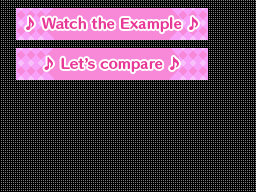
<style>
.page{position:relative;width:256px;height:192px;background:#000000}
.page>*{position:absolute;margin:0}
.t1{font:13px "HummingStd-E";letter-spacing:0.02em;color:#e83898}
</style>
<div class="page">
<p class="t1" style="left:26px;top:16px;width:172px;height:17px">♪ Watch the Example ♪</p>
<p class="t1" style="left:44px;top:56px;width:135px;height:17px">♪ Let’s compare ♪</p>
</div>
